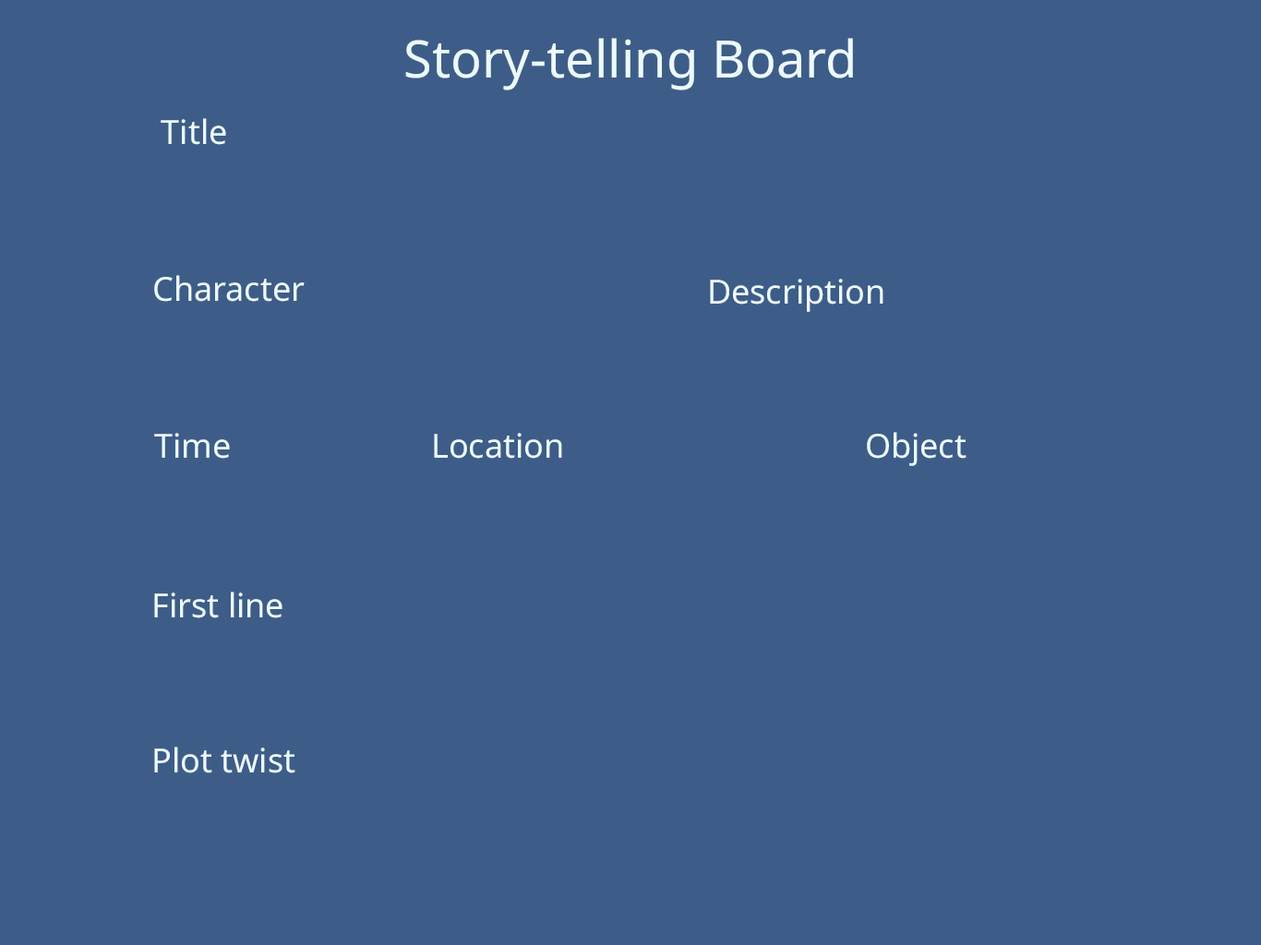
<style>
.page{position:relative;width:1261px;height:945px;background:#3d5d88}
.page>*{position:absolute;margin:0}
.t1{font:51.7px "NotoSans-Regular";color:#edfafd}
.t2{font:33.2px "NotoSans-Regular";color:#edfafd}
</style>
<div class="page">
<p class="t1" style="left:405px;top:38px;width:448px;height:52px">Story-telling Board</p>
<p class="t2" style="left:161px;top:118px;width:65px;height:27px">Title</p>
<p class="t2" style="left:154px;top:275px;width:151px;height:27px">Character</p>
<p class="t2" style="left:710px;top:279px;width:174px;height:33px">Description</p>
<p class="t2" style="left:154px;top:433px;width:76px;height:26px">Time</p>
<p class="t2" style="left:434px;top:433px;width:128px;height:26px">Location</p>
<p class="t2" style="left:867px;top:432px;width:100px;height:34px">Object</p>
<p class="t2" style="left:154px;top:592px;width:129px;height:27px">First line</p>
<p class="t2" style="left:154px;top:747px;width:141px;height:27px">Plot twist</p>
</div>
